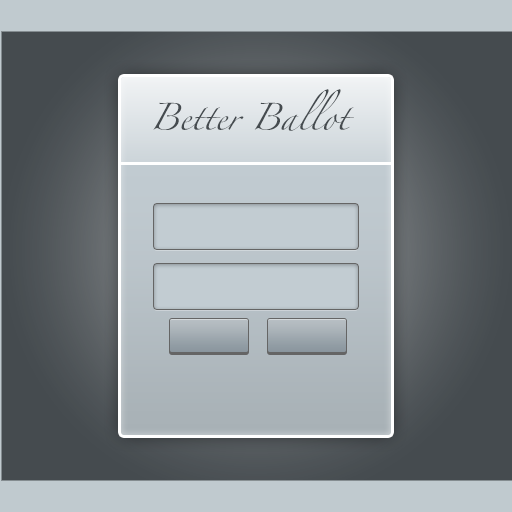
<style>
.page{position:relative;width:512px;height:512px}
.page>*{position:absolute;margin:0}
.t1{font:24px/14px "Zapfino";color:#454b4f}
</style>
<div class="page">
<p class="t1" style="left:153px;top:89px;width:201px;height:42px;text-align:center">Better Ballot</p>
</div>
